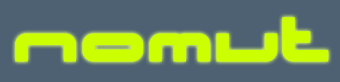
<style>
.page{position:relative;width:340px;height:82px;background:#4e6172}
.page>*{position:absolute;margin:0}
.t1{font:73.3px "BNCosmicGirl";color:#ccff00}
</style>
<div class="page">
<p class="t1" style="left:15px;top:17px;width:314px;height:45px">NoMut</p>
</div>
